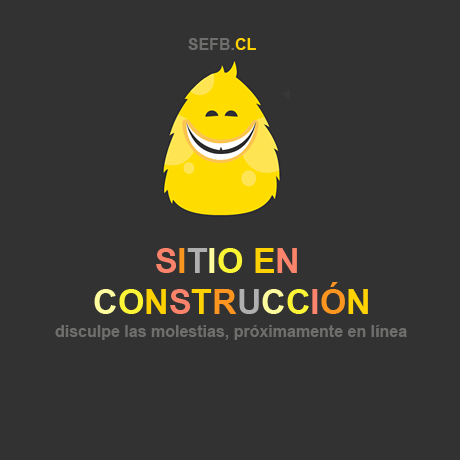
<style>
.page{position:relative;width:460px;height:460px;background:#323232}
.page>*{position:absolute;margin:0}
.t1{font:16px "Arial-BoldMT";color:#6e6e6c}
.t2{font:16px "Arial-BoldMT";color:#ffd202}
.t3{font:34px "Arial-BoldMT";color:#fb836b}
.t4{font:34px "Arial-BoldMT";color:#fa951f}
.t5{font:34px "Arial-BoldMT";color:#afafaf}
.t6{font:34px "Arial-BoldMT";color:#fefb9c}
.t7{font:34px "Arial-BoldMT";color:#faf635}
.t8{font:34px "Arial-BoldMT";color:#ffd100}
.t9{font:34px "Arial-BoldMT";color:#fc846b}
.t10{font:34px "Arial-BoldMT";color:#fffc9f}
.t11{font:34px "Arial-BoldMT";color:#fdf636}
.t12{font:34px "Arial-BoldMT";color:#fa836b}
.t13{font:34px "Arial-BoldMT";color:#ffd200}
.t14{font:34px "Arial-BoldMT";color:#fe9520}
.t15{font:34px "Arial-BoldMT";color:#fefb9e}
.t16{font:34px "Arial-BoldMT";color:#fcf437}
.t17{font:34px "Arial-BoldMT";color:#fd856d}
.t18{font:34px "Arial-BoldMT";color:#fd9620}
.t19{font:34px "Arial-BoldMT";color:#ffd202}
</style>
<div class="page">
<p class="t1" style="left:188px;top:38px;width:68px;height:12px">SEFB.<span class="t2">CL</span></p>
<p class="t3" style="left:94px;top:248px;width:274px;height:66px;text-align:center">S<span class="t4">I</span><span class="t5">T</span><span class="t6">I</span><span class="t7">O </span><span class="t8">E</span><span class="t9">N <br></span><span class="t10">C</span><span class="t11">O</span><span class="t8">N</span><span class="t12">S</span><span class="t13">T</span><span class="t14">R</span><span class="t5">U</span><span class="t15">C</span><span class="t16">C</span><span class="t17">I</span><span class="t18">Ó</span><span class="t19">N</span></p>
<p class="t1" style="left:55px;top:325px;width:352px;height:15px">disculpe las molestias, próximamente en línea</p>
</div>
